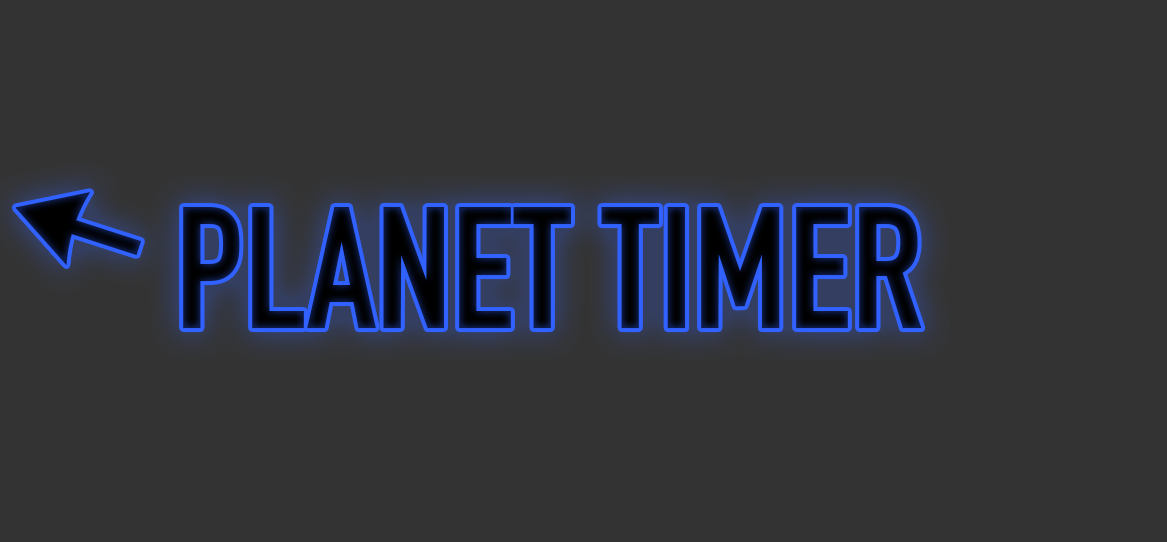
<style>
.page{position:relative;width:1167px;height:542px;background:#333333}
.page>*{position:absolute;margin:0}
.t1{font:170px "DINEngschrift";text-transform:uppercase}
</style>
<div class="page">
<p class="t1" style="left:183px;top:206px;width:739px;height:123px">planet timer</p>
</div>
